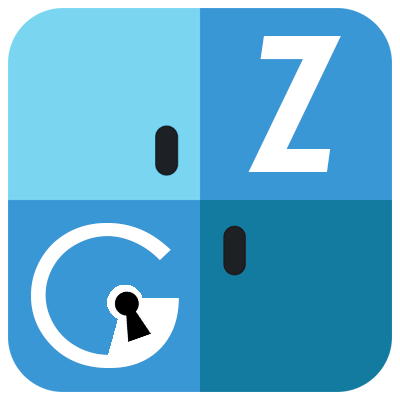
<style>
.page{position:relative;width:400px;height:400px;background:#3a97d6}
.page>*{position:absolute;margin:0}
.t1{font:190px "CenturyGothic-BoldItalic";letter-spacing:0.5em;color:#ffffff}
.t2{font:192.7px "CenturyGothic";letter-spacing:0.5em;color:#ffffff}
</style>
<div class="page">
<p class="t1" style="left:248px;top:36px;width:93px;height:136px">Z</p>
<p class="t2" style="left:31px;top:223px;width:148px;height:145px">G</p>
</div>
